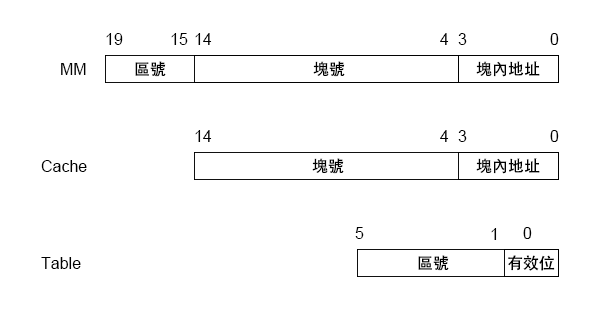
<style>
.page{position:relative;width:600px;height:310px;background:#ffffff}
.page>*{position:absolute;margin:0}
.t1{font:12px "ArialMT";color:#000000}
.t2{font:12px "AdobeHeitiStd-Regular";color:#000000}
</style>
<div class="page">
<p class="t1" style="left:106px;top:33px;width:17px;height:12px">19</p>
<p class="t1" style="left:171px;top:33px;width:17px;height:12px">15</p>
<p class="t1" style="left:195px;top:33px;width:17px;height:12px">14</p>
<p class="t1" style="left:440px;top:33px;width:9px;height:12px">4</p>
<p class="t1" style="left:458px;top:33px;width:9px;height:12px">3</p>
<p class="t1" style="left:550px;top:33px;width:9px;height:12px">0</p>
<p class="t1" style="left:61px;top:63px;width:25px;height:12px">MM</p>
<p class="t2" style="left:135px;top:61px;width:31px;height:16px">區號</p>
<p class="t2" style="left:313px;top:61px;width:32px;height:16px">塊號</p>
<p class="t2" style="left:476px;top:61px;width:64px;height:16px">塊內地址</p>
<p class="t1" style="left:195px;top:130px;width:17px;height:12px">14</p>
<p class="t1" style="left:440px;top:130px;width:9px;height:12px">4</p>
<p class="t1" style="left:458px;top:130px;width:9px;height:12px">3</p>
<p class="t1" style="left:550px;top:130px;width:9px;height:12px">0</p>
<p class="t1" style="left:41px;top:160px;width:46px;height:12px">Cache</p>
<p class="t2" style="left:312px;top:158px;width:32px;height:16px">塊號</p>
<p class="t2" style="left:476px;top:158px;width:64px;height:16px">塊內地址</p>
<p class="t1" style="left:355px;top:227px;width:9px;height:12px">5</p>
<p class="t1" style="left:491px;top:228px;width:6px;height:12px">1</p>
<p class="t1" style="left:523px;top:227px;width:9px;height:12px">0</p>
<p class="t1" style="left:41px;top:257px;width:40px;height:12px">Table</p>
<p class="t2" style="left:418px;top:255px;width:31px;height:16px">區號</p>
<p class="t2" style="left:508px;top:255px;width:47px;height:16px">有效位</p>
</div>
